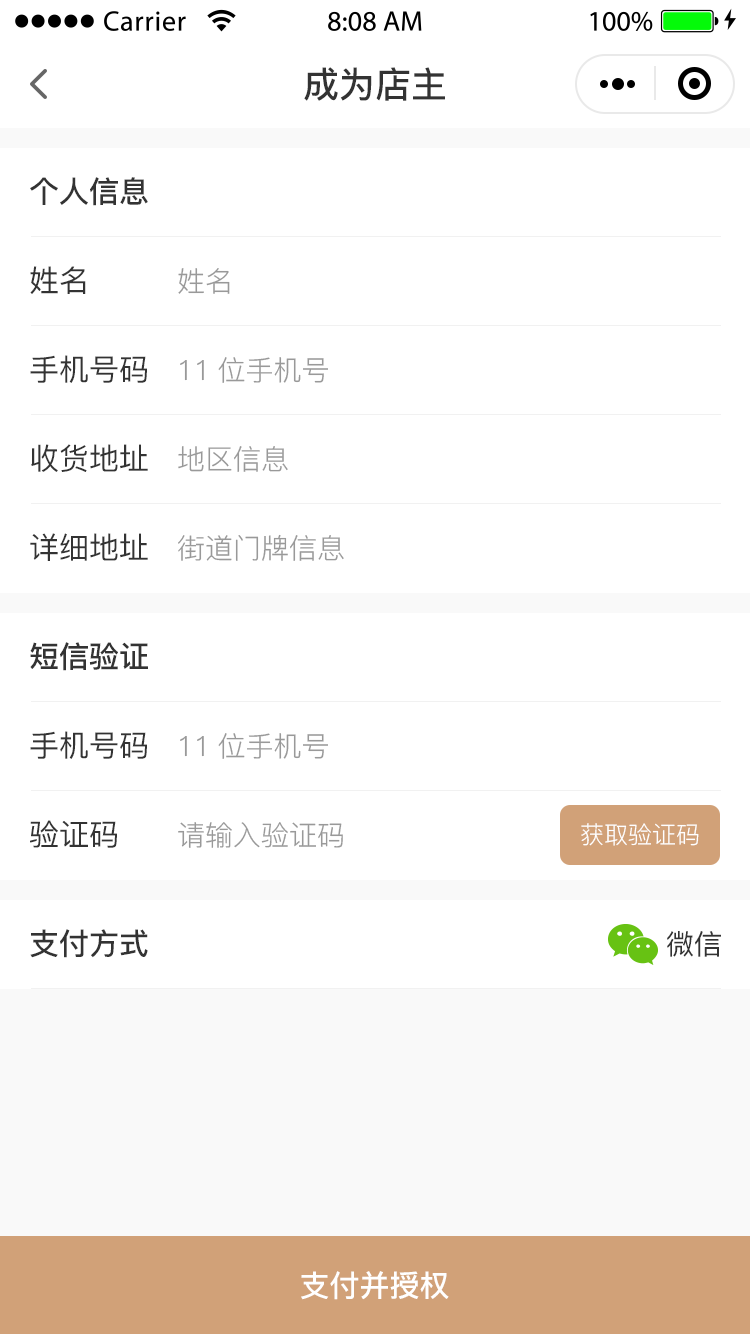
<style>
.page{position:relative;width:750px;height:1334px;background:#ffffff}
.page>*{position:absolute;margin:0}
.t1{font:36px "PingFang-SC-Bold";color:#333333}
.t2{font:30px "PingFang-SC-Bold";color:#333333}
.t3{font:30px "PingFang-SC-Medium";color:#333333}
.t4{font:28px "PingFang-SC-Regular";color:#999999}
.t5{font:24px "PingFang-SC-Regular";color:#ffffff}
.t6{font:28px "PingFang-SC-Medium";color:#333333}
.t7{font:30px "PingFang-SC-Bold";color:#ffffff}
</style>
<div class="page">
<p class="t1" style="left:304px;top:67px;width:141px;height:34px">成为店主</p>
<p class="t2" style="left:30px;top:177px;width:118px;height:29px">个人信息</p>
<p class="t3" style="left:30px;top:266px;width:56px;height:28px">姓名</p>
<p class="t4" style="left:178px;top:268px;width:52px;height:26px">姓名</p>
<p class="t3" style="left:30px;top:355px;width:117px;height:28px">手机号码</p>
<p class="t4" style="left:180px;top:357px;width:148px;height:26px">11位手机号</p>
<p class="t3" style="left:31px;top:444px;width:117px;height:28px">收货地址</p>
<p class="t4" style="left:178px;top:446px;width:110px;height:26px">地区信息</p>
<p class="t3" style="left:30px;top:533px;width:118px;height:28px">详细地址</p>
<p class="t4" style="left:178px;top:534px;width:166px;height:27px">街道门牌信息</p>
<p class="t2" style="left:30px;top:642px;width:118px;height:29px">短信验证</p>
<p class="t3" style="left:30px;top:731px;width:117px;height:28px">手机号码</p>
<p class="t4" style="left:180px;top:733px;width:148px;height:26px">11位手机号</p>
<p class="t3" style="left:30px;top:820px;width:87px;height:28px">验证码</p>
<p class="t4" style="left:178px;top:822px;width:165px;height:26px">请输入验证码</p>
<p class="t5" style="left:581px;top:823px;width:118px;height:23px">获取验证码</p>
<p class="t2" style="left:30px;top:929px;width:118px;height:29px">支付方式</p>
<p class="t6" style="left:667px;top:931px;width:54px;height:26px">微信</p>
<p class="t7" style="left:301px;top:1271px;width:148px;height:29px">支付并授权</p>
</div>
